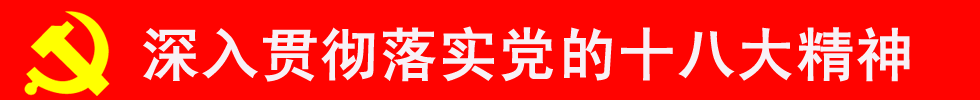
<style>
.page{position:relative;width:980px;height:100px;background:#ff0300}
.page>*{position:absolute;margin:0}
.t1{font:58px "SimHei";color:#f8f1f6;font-weight:bold}
</style>
<div class="page">
<p class="t1" style="left:143px;top:26px;width:767px;height:56px">深入贯彻落实党的十八大精神</p>
</div>
